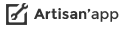
<style>
.page{position:relative;width:127px;height:29px;background:#ffffff}
.page>*{position:absolute;margin:0}
.t1{font:14.4px "Montserrat-Bold";letter-spacing:0.01em;color:#333333}
.t2{font:14.4px "Montserrat-Regular";letter-spacing:0.01em;color:#333333}
</style>
<div class="page">
<p class="t1" style="left:34px;top:8px;width:85px;height:14px">Artisan’<span class="t2">app</span></p>
</div>
